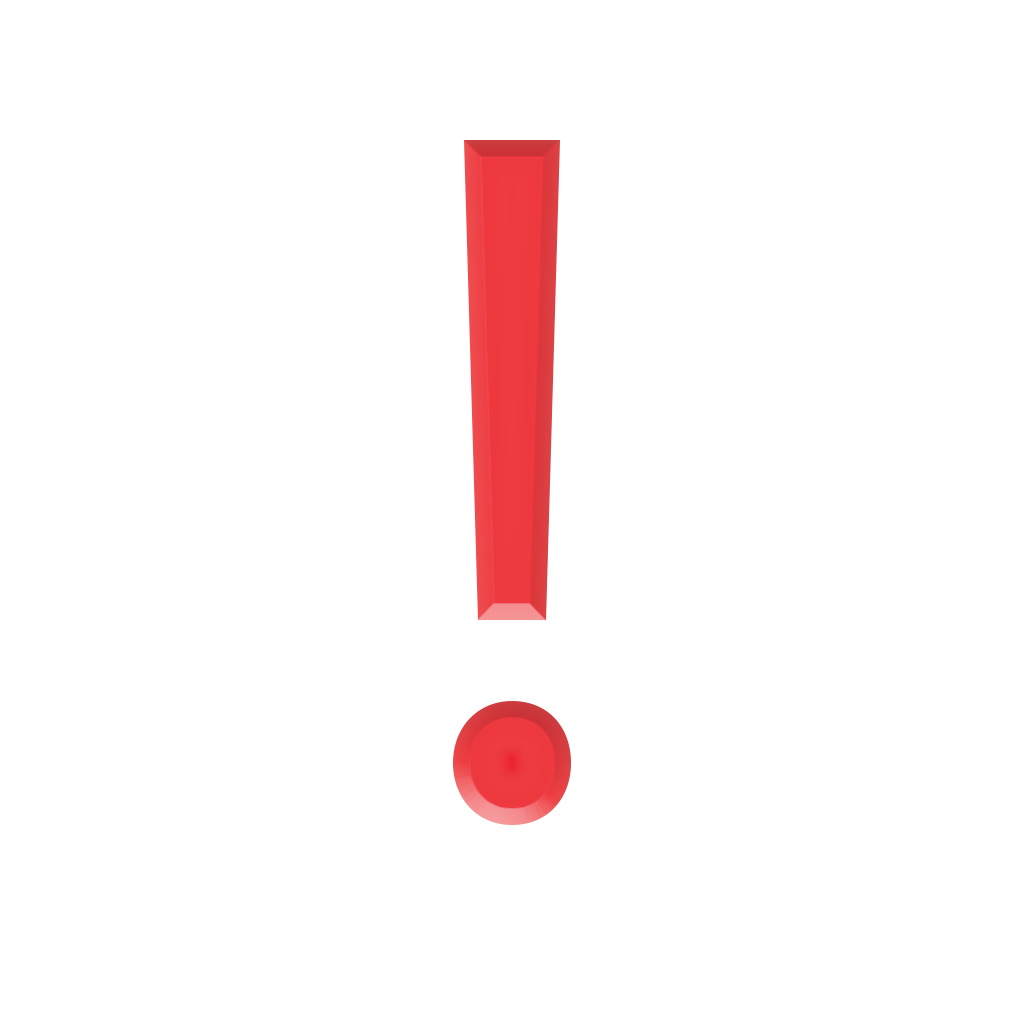
<style>
.page{position:relative;width:1024px;height:1024px;background:#ffffff}
.page>*{position:absolute;margin:0}
.t1{font:1000px "MyriadPro-Regular";color:#ed3a3f}
</style>
<div class="page">
<p class="t1" style="left:453px;top:140px;width:118px;height:685px">!</p>
</div>
